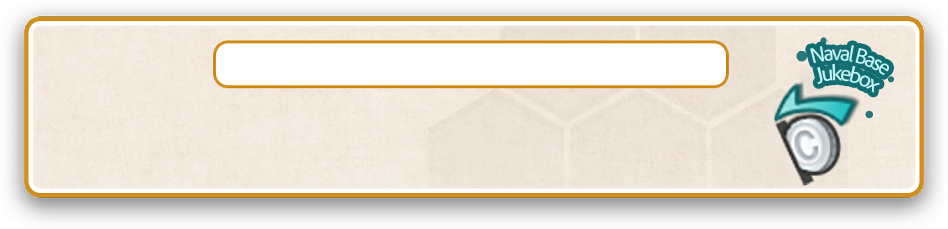
<style>
.page{position:relative;width:948px;height:229px}
.page>*{position:absolute;margin:0}
.t1{font:22px/20px "AdobeClean-Regular";letter-spacing:-0.08em;color:#c2f7f7;scale:0.6 1}
.t2{font:22px/20px "AdobeClean-Regular";letter-spacing:-0.08em;color:#c2f7f7;scale:0.8 1}
</style>
<div class="page">
<p class="t1" style="left:810px;top:45px;width:79px;height:48px;text-align:center;rotate:10deg">Naval Base<br><span class="t2">Jukebox</span></p>
</div>
